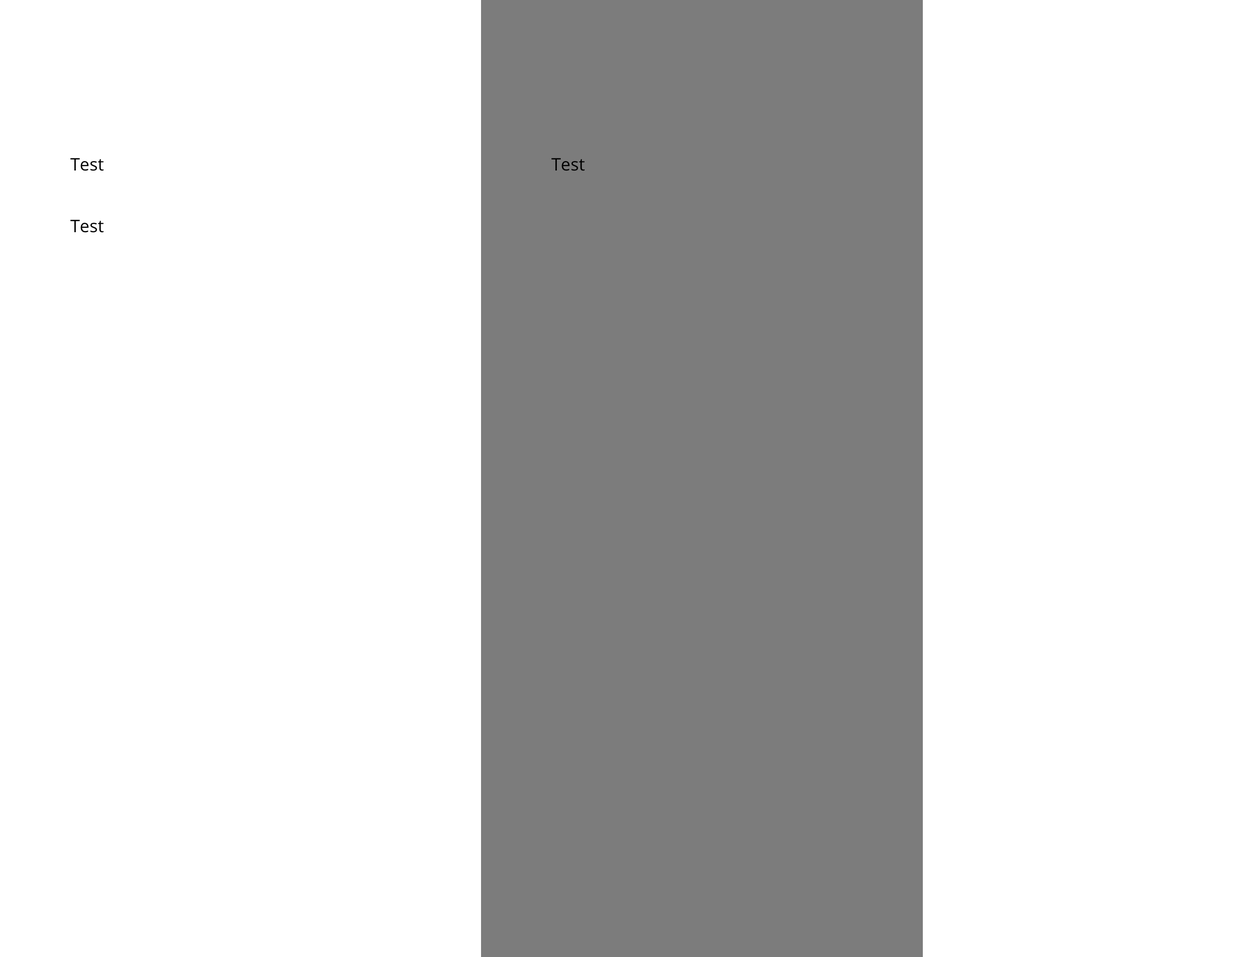
<style>
.page{position:relative;width:1246px;height:957px;background:#ffffff}
.page>*{position:absolute;margin:0}
.t1{font:17.3px "OpenSans";color:#000000}
</style>
<div class="page">
<p class="t1" style="left:70px;top:158px;width:34px;height:13px">Test</p>
<p class="t1" style="left:551px;top:158px;width:34px;height:13px">Test</p>
<p class="t1" style="left:70px;top:220px;width:34px;height:13px">Test</p>
</div>
